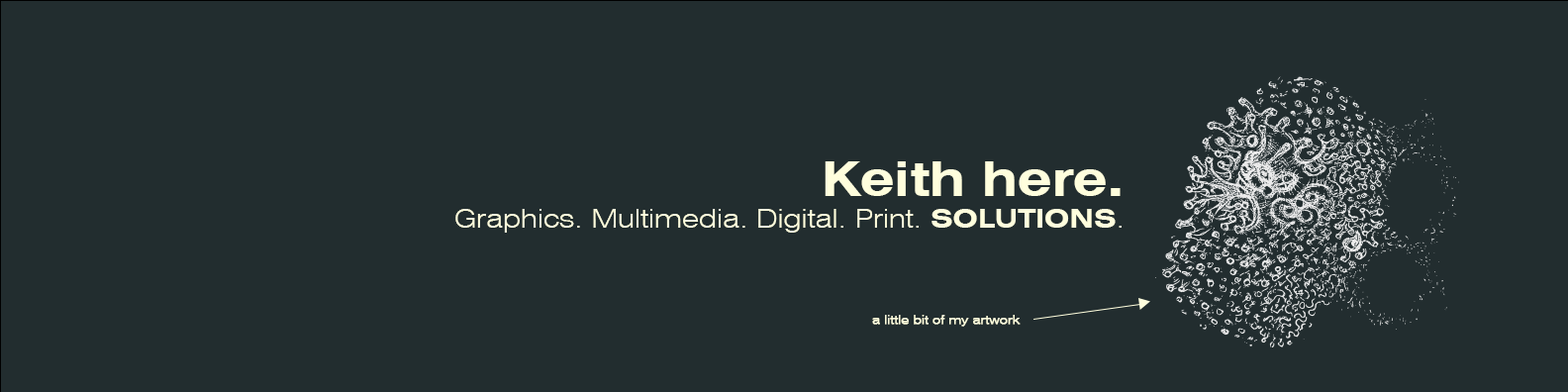
<style>
.page{position:relative;width:1568px;height:392px;background:#222d2f}
.page>*{position:absolute;margin:0}
.t1{font:47.8px "Swiss721BT-BoldExtended";color:#fffedd}
.t2{font:26.2px "Swiss721BT-LightExtended";color:#fffedd}
.t3{font:26.2px "Swiss721BT-BoldExtended";color:#fffedd;text-transform:uppercase}
.t4{font:11.9px "Swiss721BT-LightExtended";color:#fffedd;font-weight:bold}
</style>
<div class="page">
<p class="t1" style="left:825px;top:161px;width:296px;height:35px">Keith here.</p>
<p class="t2" style="left:455px;top:209px;width:667px;height:24px">Graphics. Multimedia. Digital. Print. <span class="t3">Solutions</span>.</p>
<p class="t4" style="left:872px;top:315px;width:149px;height:12px">a little bit of my artwork</p>
</div>
